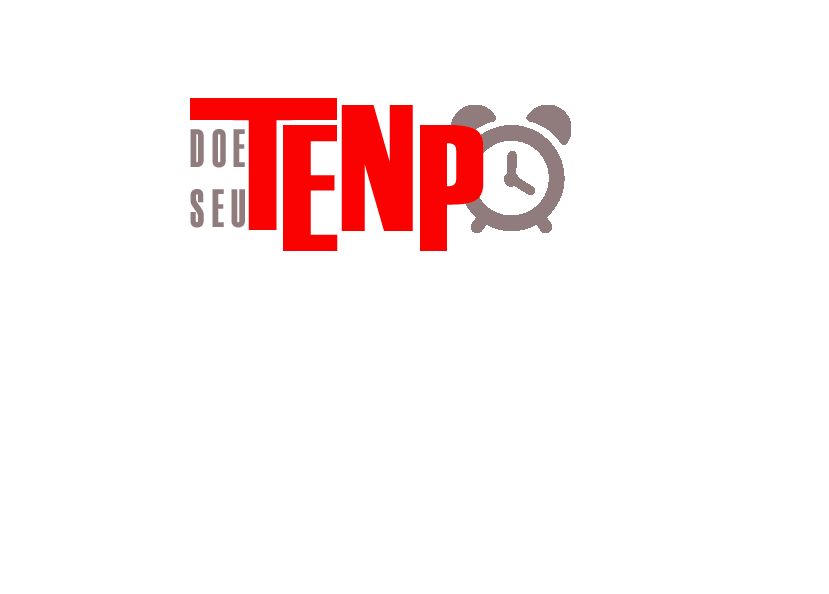
<style>
.page{position:relative;width:829px;height:594px;background:#ffffff}
.page>*{position:absolute;margin:0}
.t1{font:180px "Haettenschweiler";letter-spacing:0.2em;color:#fb0202;text-transform:uppercase}
.t2{font:54.1px/60.1px "Haettenschweiler";letter-spacing:0.2em;color:#907c7c;text-transform:uppercase;scale:0.68 1}
</style>
<div class="page">
<p class="t1" style="left:233px;top:104px;width:59px;height:126px">T</p>
<p class="t1" style="left:341px;top:105px;width:72px;height:126px">n</p>
<p class="t1" style="left:283px;top:125px;width:55px;height:126px">e</p>
<p class="t1" style="left:420px;top:125px;width:64px;height:126px">p</p>
<p class="t2" style="left:190px;top:129px;width:55px;height:99px;text-align:center">doe<br>seu</p>
</div>
